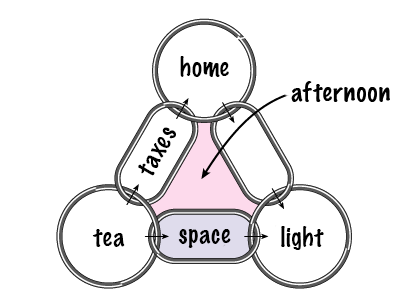
<style>
.page{position:relative;width:409px;height:307px;background:#ffffff}
.page>*{position:absolute;margin:0}
.t1{font:24px "MarkerFelt-Thin";color:#000000}
</style>
<div class="page">
<p class="t1" style="left:180px;top:56px;width:49px;height:21px">home</p>
<p class="t1" style="left:291px;top:81px;width:99px;height:21px">afternoon</p>
<p class="t1" style="left:138px;top:127px;width:38px;height:49px;rotate:-60deg">taxes</p>
<p class="t1" style="left:92px;top:229px;width:33px;height:18px">tea</p>
<p class="t1" style="left:178px;top:229px;width:53px;height:19px">space</p>
<p class="t1" style="left:281px;top:226px;width:43px;height:24px">light</p>
</div>
